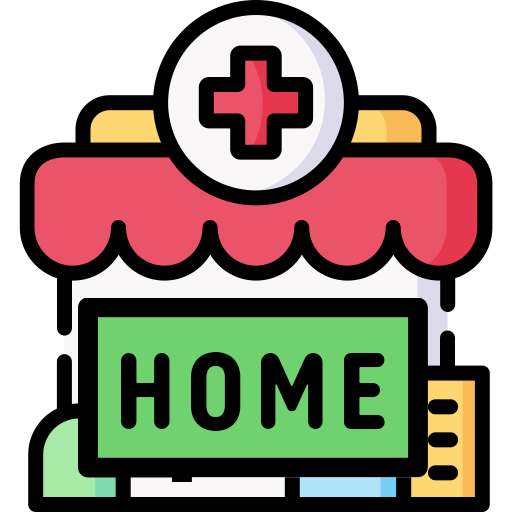
<style>
.page{position:relative;width:512px;height:512px;background:#000000}
.page>*{position:absolute;margin:0}
.t1{font:106.7px "BudokanRounded-Bold";letter-spacing:0.12em;color:#000000}
</style>
<div class="page">
<p class="t1" style="left:121px;top:352px;width:264px;height:79px">HOMe</p>
</div>
